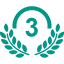
<style>
.page{position:relative;width:64px;height:64px;background:#ffffff}
.page>*{position:absolute;margin:0}
.t1{font:26px "Arial-BoldMT";color:#009688}
</style>
<div class="page">
<p class="t1" style="left:25px;top:17px;width:13px;height:20px">3</p>
</div>
